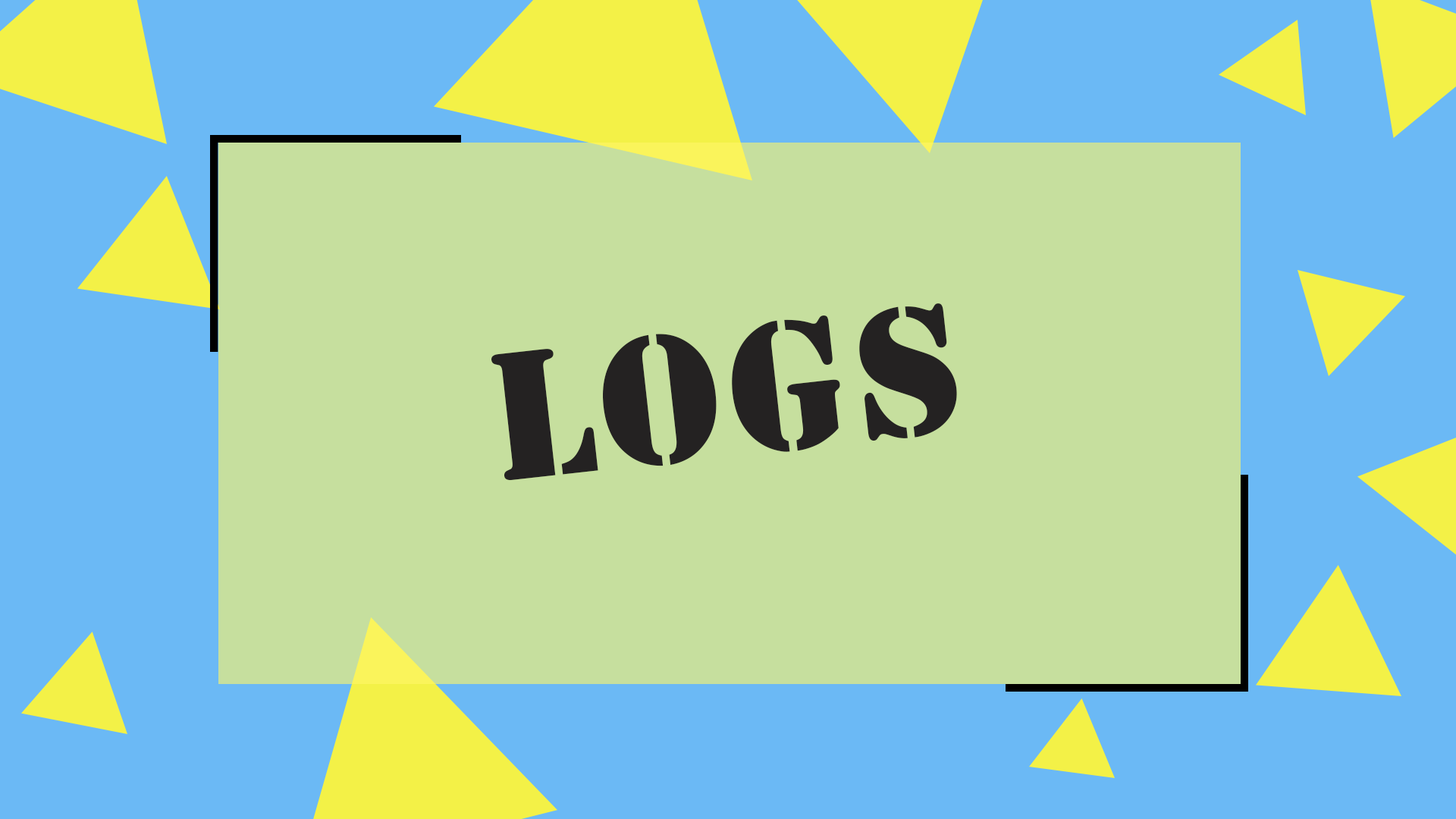
<style>
.page{position:relative;width:1456px;height:819px;background:#c6df9e}
.page>*{position:absolute;margin:0}
.t1{font:189.6px "Stencil";letter-spacing:0.05em;color:#242222}
</style>
<div class="page">
<p class="t1" style="left:491px;top:303px;width:466px;height:178px;rotate:-6deg">LOGS</p>
</div>
